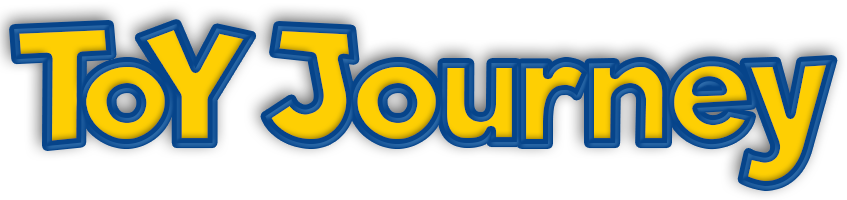
<style>
.page{position:relative;width:847px;height:200px;background:#ffffff}
.page>*{position:absolute;margin:0}
.t1{font:156px "Riffic";letter-spacing:-0.02em}
.t2{font:156px "Riffic";letter-spacing:-0.06em}
.t3{font:156px "Riffic";letter-spacing:-0.22em}
.t4{font:156px "Riffic";letter-spacing:-0.04em}
</style>
<div class="page">
<p class="t1" style="left:14px;top:24px;width:819px;height:162px"><span class="t2">T</span><span class="t3">oY </span><span class="t4">Jo</span>urn<span class="t4">ey</span></p>
</div>
